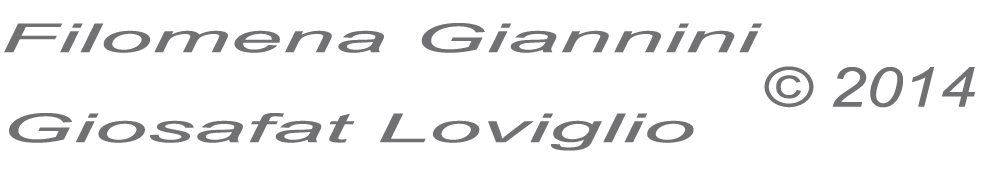
<style>
.page{position:relative;width:1000px;height:170px;background:#ffffff}
.page>*{position:absolute;margin:0}
.t1{font:40px "Arial-ItalicMT";color:#717173;scale:2.35 1}
.t2{font:55px "Arial-ItalicMT";color:#717173;scale:1.2 1}
.t3{font:60px "Arial-ItalicMT";color:#717173;scale:1.2 1}
</style>
<div class="page">
<p class="t1" style="left:4px;top:23px;width:758px;height:128px">Filomena Giannini<br><br>Giosafat Loviglio</p>
<p class="t2" style="left:764px;top:66px;width:211px;height:42px">© 2014 <span class="t3">2014</span></p>
</div>
